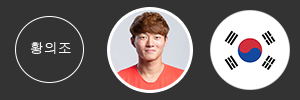
<style>
.page{position:relative;width:300px;height:100px;background:#333333}
.page>*{position:absolute;margin:0}
.t1{font:14px "Gulim";color:#ffffff}
</style>
<div class="page">
<p class="t1" style="left:30px;top:42px;width:41px;height:12px">황의조</p>
</div>
